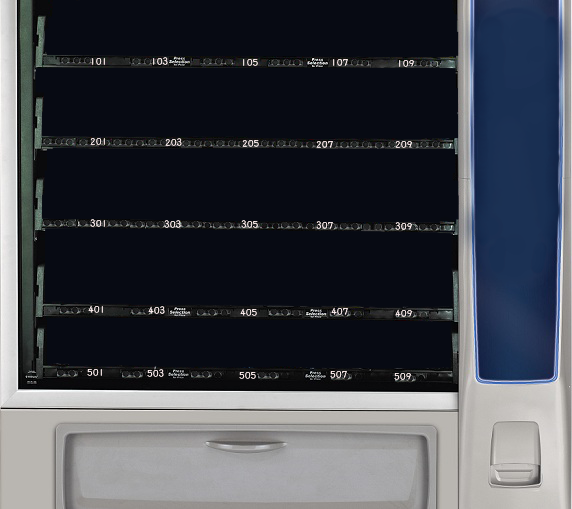
<style>
.page{position:relative;width:572px;height:509px;background:#070a13}
.page>*{position:absolute;margin:0}
.t1{font:8.3px "MMTextBook";color:#faecec}
</style>
<div class="page">
<p class="t1" style="left:92px;top:58px;width:13px;height:7px">101</p>
<p class="t1" style="left:153px;top:57px;width:15px;height:8px">103</p>
<p class="t1" style="left:243px;top:59px;width:15px;height:7px">105</p>
<p class="t1" style="left:333px;top:59px;width:15px;height:7px">107</p>
<p class="t1" style="left:399px;top:60px;width:15px;height:7px">109</p>
<p class="t1" style="left:90px;top:138px;width:15px;height:7px">201</p>
<p class="t1" style="left:165px;top:138px;width:17px;height:8px">203</p>
<p class="t1" style="left:242px;top:140px;width:17px;height:7px">205</p>
<p class="t1" style="left:316px;top:141px;width:17px;height:7px">207</p>
<p class="t1" style="left:395px;top:141px;width:17px;height:7px">209</p>
<p class="t1" style="left:90px;top:219px;width:15px;height:8px">301</p>
<p class="t1" style="left:164px;top:220px;width:17px;height:8px">303</p>
<p class="t1" style="left:241px;top:220px;width:17px;height:8px">305</p>
<p class="t1" style="left:316px;top:221px;width:17px;height:8px">307</p>
<p class="t1" style="left:395px;top:222px;width:17px;height:8px">309</p>
<p class="t1" style="left:88px;top:305px;width:15px;height:8px">401</p>
<p class="t1" style="left:148px;top:306px;width:17px;height:8px">403</p>
<p class="t1" style="left:240px;top:308px;width:17px;height:8px">405</p>
<p class="t1" style="left:331px;top:307px;width:17px;height:8px">407</p>
<p class="t1" style="left:395px;top:309px;width:17px;height:8px">409</p>
<p class="t1" style="left:87px;top:369px;width:15px;height:7px">501</p>
<p class="t1" style="left:147px;top:369px;width:17px;height:8px">503</p>
<p class="t1" style="left:239px;top:372px;width:17px;height:7px">505</p>
<p class="t1" style="left:330px;top:371px;width:17px;height:7px">507</p>
<p class="t1" style="left:394px;top:373px;width:17px;height:7px">509</p>
</div>
